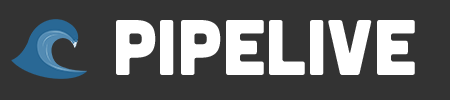
<style>
.page{position:relative;width:450px;height:100px;background:#333333}
.page>*{position:absolute;margin:0}
.t1{font:78.5px "Cubano-Regular";color:#ffffff}
</style>
<div class="page">
<p class="t1" style="left:116px;top:20px;width:299px;height:55px">pipelive</p>
</div>
